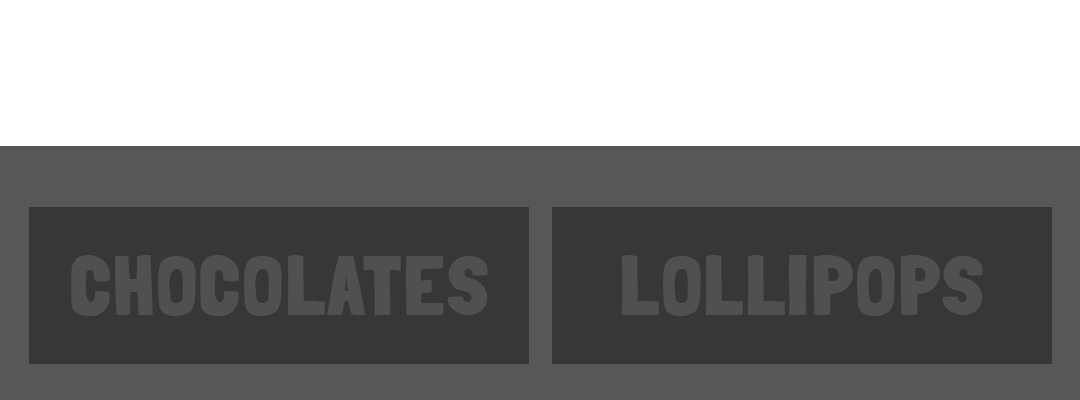
<style>
.page{position:relative;width:1080px;height:400px;background:#ffffff}
.page>*{position:absolute;margin:0}
.t1{font:82px "LondrinaSolid-Black";letter-spacing:0.05em;color:#505050}
</style>
<div class="page">
<p class="t1" style="left:71px;top:255px;width:417px;height:61px">CHOCOLATES</p>
<p class="t1" style="left:621px;top:255px;width:362px;height:61px">LOLLIPOPS</p>
</div>
